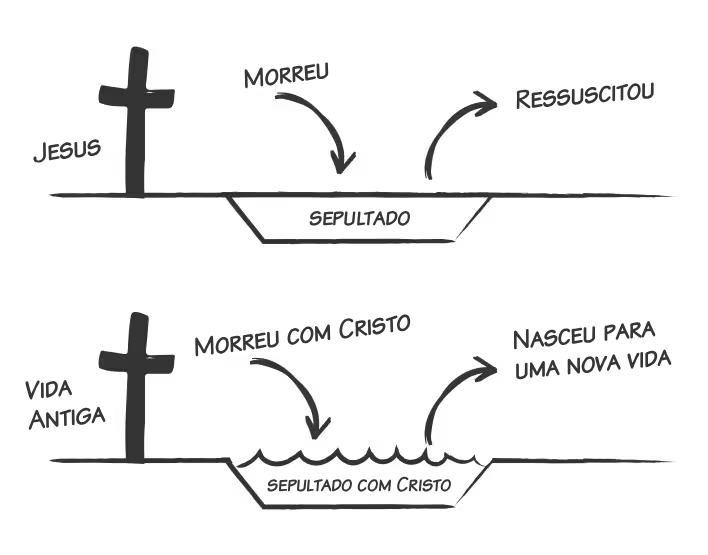
<style>
.page{position:relative;width:708px;height:555px;background:#ffffff}
.page>*{position:absolute;margin:0}
.t1{font:28px "KomikaTextKaps";color:#363636}
.t2{font:25px "KomikaTextKaps";color:#363636}
.t3{font:28px/30px "KomikaTextKaps";color:#363636}
.t4{font:21px "KomikaTextKaps";color:#363636}
</style>
<div class="page">
<p class="t1" style="left:244px;top:62px;width:85px;height:27px;rotate:-7deg">Morreu</p>
<p class="t1" style="left:516px;top:82px;width:138px;height:28px;rotate:-5deg">Ressuscitou</p>
<p class="t1" style="left:33px;top:139px;width:68px;height:24px;rotate:-6deg">Jesus</p>
<p class="t2" style="left:309px;top:210px;width:101px;height:16px">sepultado</p>
<p class="t1" style="left:195px;top:314px;width:216px;height:43px;rotate:-7deg">Morreu com Cristo</p>
<p class="t3" style="left:513px;top:320px;width:159px;height:60px;rotate:-5deg">Nasceu para<br>uma nova vida</p>
<p class="t3" style="left:25px;top:379px;width:81px;height:51px;rotate:-6deg">Vida<br>Antiga</p>
<p class="t4" style="left:267px;top:476px;width:184px;height:16px">sepultado com Cristo</p>
</div>
